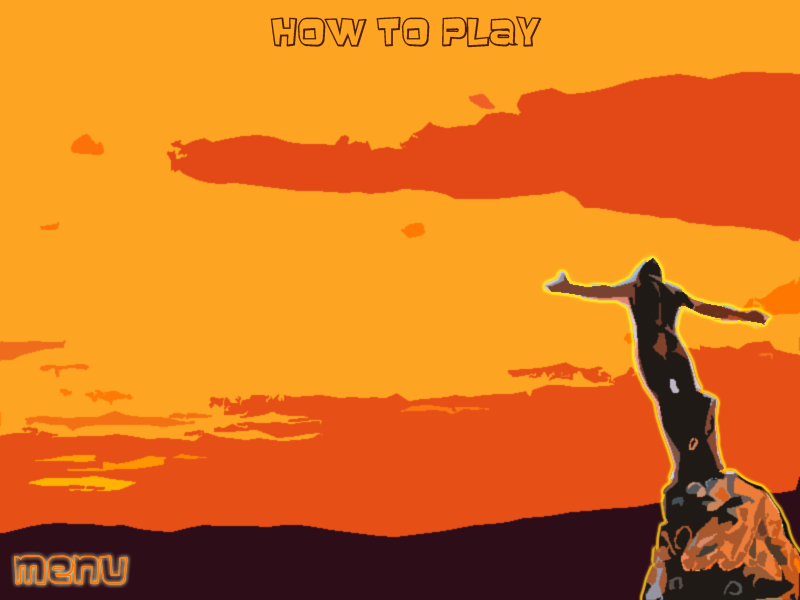
<style>
.page{position:relative;width:800px;height:600px;background:#fda522}
.page>*{position:absolute;margin:0}
.t1{font:31.7px "Baveuse3D";color:#4e1e02}
.t2{font:31.7px "Baveuse3D";color:#fe7404}
</style>
<div class="page">
<p class="t1" style="left:270px;top:16px;width:272px;height:32px">how to play</p>
<p class="t2" style="left:14px;top:554px;width:114px;height:31px">Menu</p>
<p class="t2" style="left:14px;top:554px;width:114px;height:31px">Menu</p>
</div>
